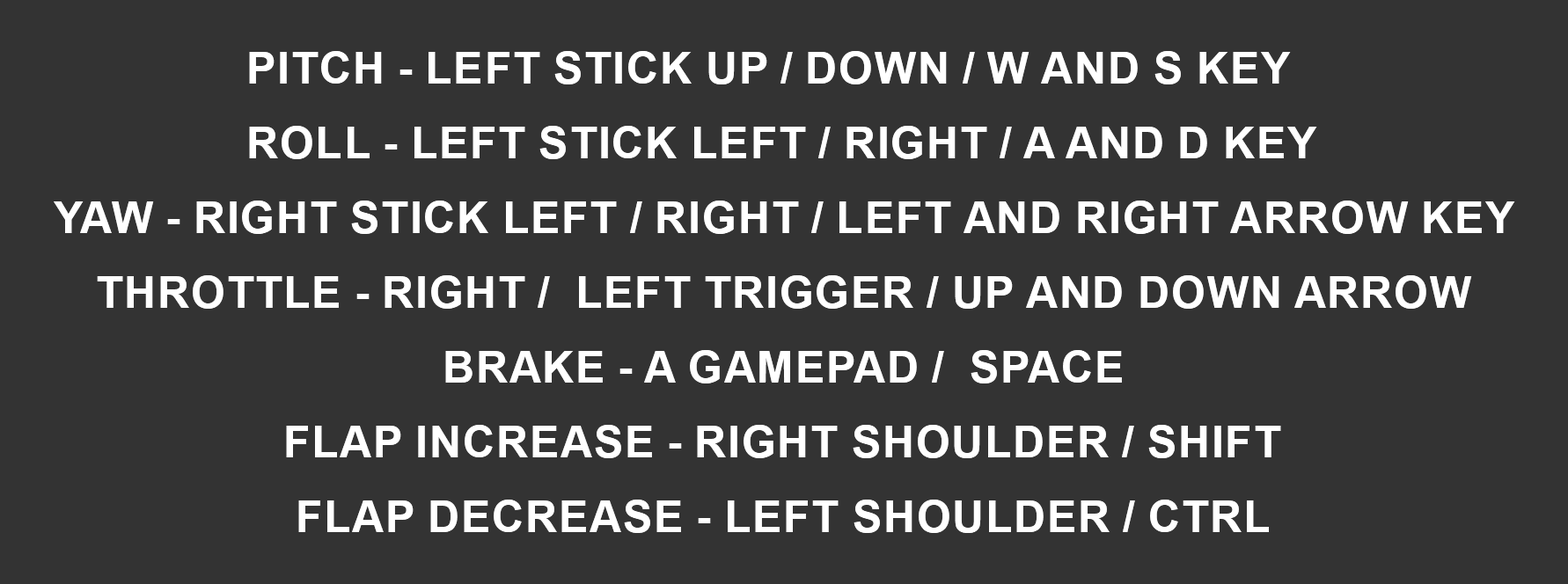
<style>
.page{position:relative;width:1568px;height:584px;background:#333333}
.page>*{position:absolute;margin:0}
.t1{font:44px "Arial-BoldMT";color:#ffffff;text-transform:uppercase}
</style>
<div class="page">
<p class="t1" style="left:249px;top:51px;width:1042px;height:33px">PITCH - LEFT STICK up / down / w and s key</p>
<p class="t1" style="left:249px;top:126px;width:1068px;height:33px">ROLL - LEFT STICK LEFT / RIGHT / a and D key</p>
<p class="t1" style="left:54px;top:201px;width:1461px;height:33px">YAW - RIGHT STICK LEFT / RIGHT / LEFT and RIGHT ARROW KEY</p>
<p class="t1" style="left:97px;top:275px;width:1375px;height:34px">THROTTLE - RIGHT /  LEFT TRIGGER / UP AND DOWN ARROW</p>
<p class="t1" style="left:445px;top:350px;width:677px;height:34px">BRAKE - A GAMEPAD /  SPACE</p>
<p class="t1" style="left:286px;top:425px;width:995px;height:33px">FLAP INCREASE - RIGHT SHOULDER / SHIFT</p>
<p class="t1" style="left:298px;top:500px;width:971px;height:33px">FLAP DECREASE - LEFT SHOULDER / CTRL</p>
</div>
